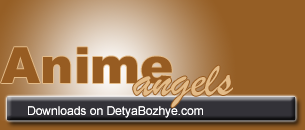
<style>
.page{position:relative;width:305px;height:130px}
.page>*{position:absolute;margin:0}
.t1{font:50px "Arial-Black";color:#975c22}
.t2{font:50px "BrushScriptMT";color:#e3bb88}
.t3{font:12px "ArialMT";color:#ffffff}
</style>
<div class="page">
<p class="t1" style="left:1px;top:47px;width:171px;height:37px">Anime</p>
<p class="t2" style="left:133px;top:65px;width:100px;height:43px">angels</p>
<p class="t3" style="left:28px;top:106px;width:175px;height:12px">Downloads on DetyaBozhye.com</p>
</div>
